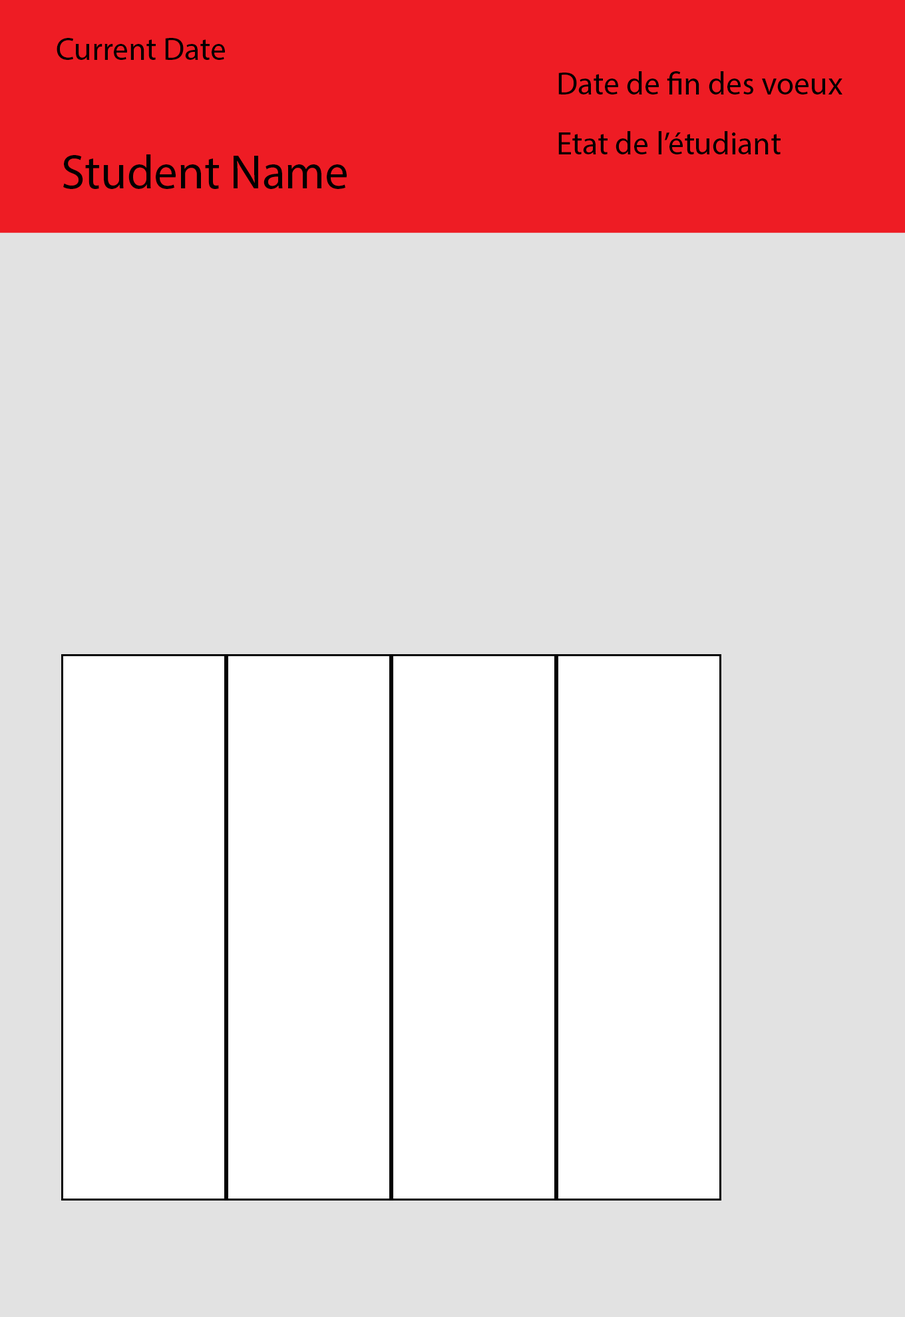
<style>
.page{position:relative;width:905px;height:1317px;background:#e2e2e2}
.page>*{position:absolute;margin:0}
.t1{font:31.9px "MyriadPro-Regular";color:#000000}
.t2{font:47.9px "MyriadPro-Regular";color:#000000}
</style>
<div class="page">
<p class="t1" style="left:57px;top:38px;width:168px;height:22px">Current Date</p>
<p class="t1" style="left:558px;top:71px;width:285px;height:24px">Date de fin des voeux</p>
<p class="t1" style="left:558px;top:131px;width:223px;height:23px">Etat de l’étudiant</p>
<p class="t2" style="left:63px;top:154px;width:284px;height:35px">Student Name</p>
</div>
